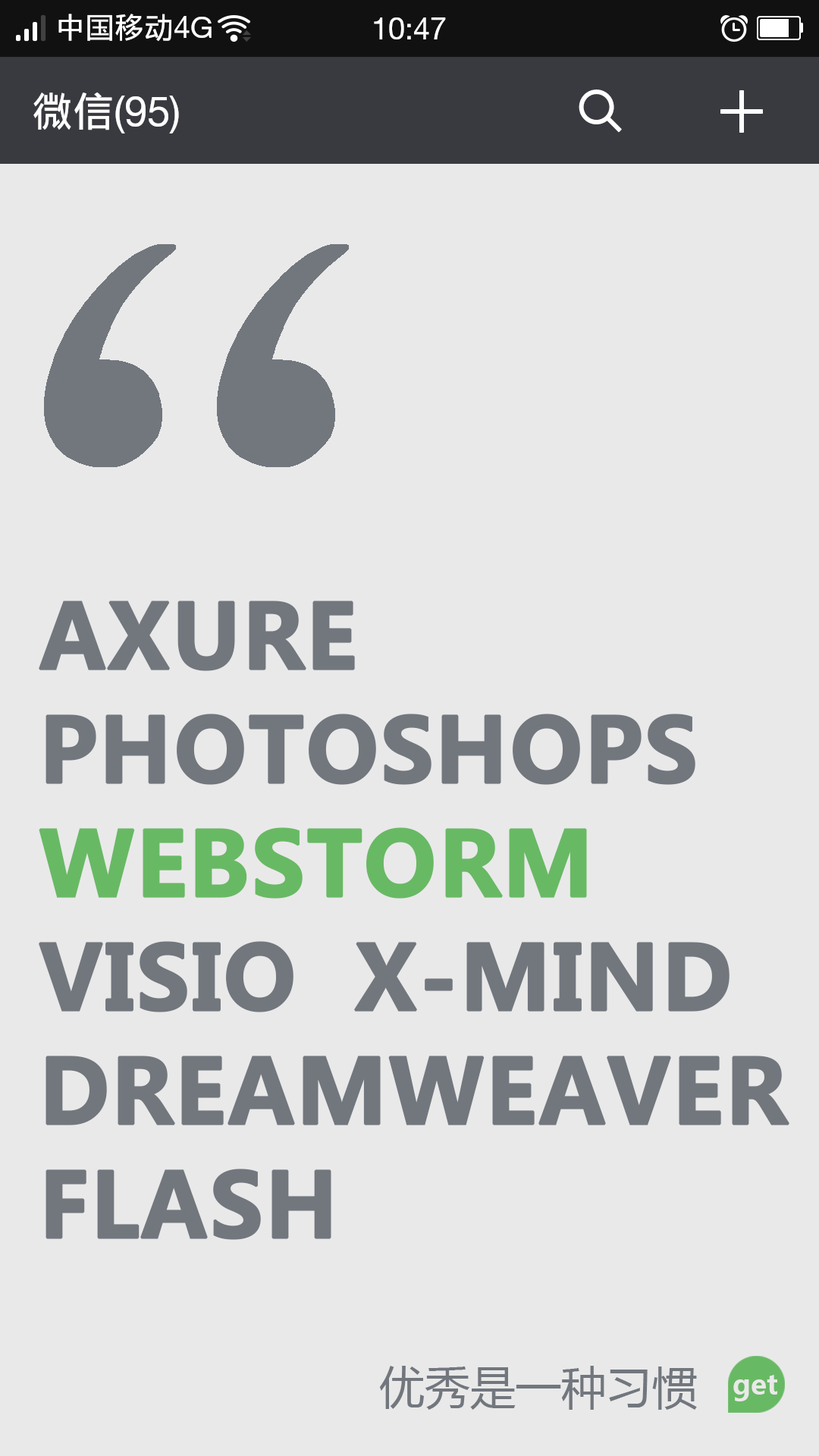
<style>
.page{position:relative;width:819px;height:1456px;background:#e9e9e9}
.page>*{position:absolute;margin:0}
.t1{font:88px/56.9px "MicrosoftYaHei-Bold";color:#72777e;font-weight:bold}
.t2{font:88px/56.9px "MicrosoftYaHei-Bold";color:#68b964;font-weight:bold}
.t3{font:45.5px "MicrosoftYaHei";color:#72777e}
.t4{font:27.3px "MicrosoftYaHei-Bold";color:#e9e9e9}
</style>
<div class="page">
<p class="t1" style="left:39px;top:601px;width:750px;height:639px">AXURE<br><br>PHOTOSHOPS <br><br><span class="t2">WEBSTORM<br></span><br>VISIO  X-MIND<br><br>DREAMWEAVER<br><br>FLASH</p>
<p class="t3" style="left:379px;top:1366px;width:318px;height:44px">优秀是一种习惯</p>
<p class="t4" style="left:733px;top:1375px;width:44px;height:26px">get</p>
</div>
